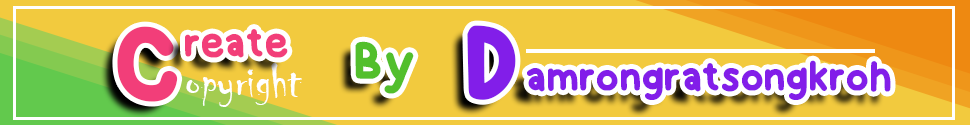
<style>
.page{position:relative;width:970px;height:125px;background:#f2ca3e}
.page>*{position:absolute;margin:0}
.t1{font:143.7px "SnowBold";color:#f23e79}
.t2{font:50px "SnowBold";color:#f23e79}
.t3{font:143.7px "SnowBold";color:#821ee9}
.t4{font:66.7px "SnowBold";color:#52bf2c}
.t5{font:49.1px "Chiller-Regular";color:#ffffff}
.t6{font:50px "SnowBold";color:#821ee9}
</style>
<div class="page">
<p class="t1" style="left:117px;top:26px;width:61px;height:76px">C</p>
<p class="t2" style="left:185px;top:29px;width:103px;height:29px">reate</p>
<p class="t3" style="left:467px;top:25px;width:49px;height:75px">D</p>
<p class="t4" style="left:355px;top:41px;width:59px;height:53px">By</p>
<p class="t5" style="left:186px;top:63px;width:116px;height:44px">opyright</p>
<p class="t6" style="left:527px;top:60px;width:364px;height:40px">amrongratsongkroh</p>
</div>
